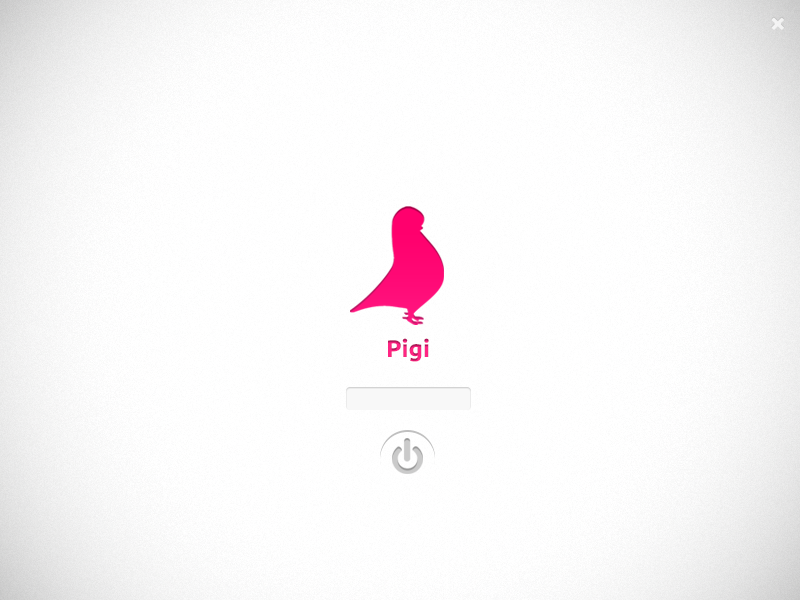
<style>
.page{position:relative;width:800px;height:600px;background:#ffffff}
.page>*{position:absolute;margin:0}
.t1{font:24.1px "Ubuntu-Bold";color:#ff2483}
</style>
<div class="page">
<p class="t1" style="left:388px;top:338px;width:41px;height:24px">Pigi</p>
</div>
